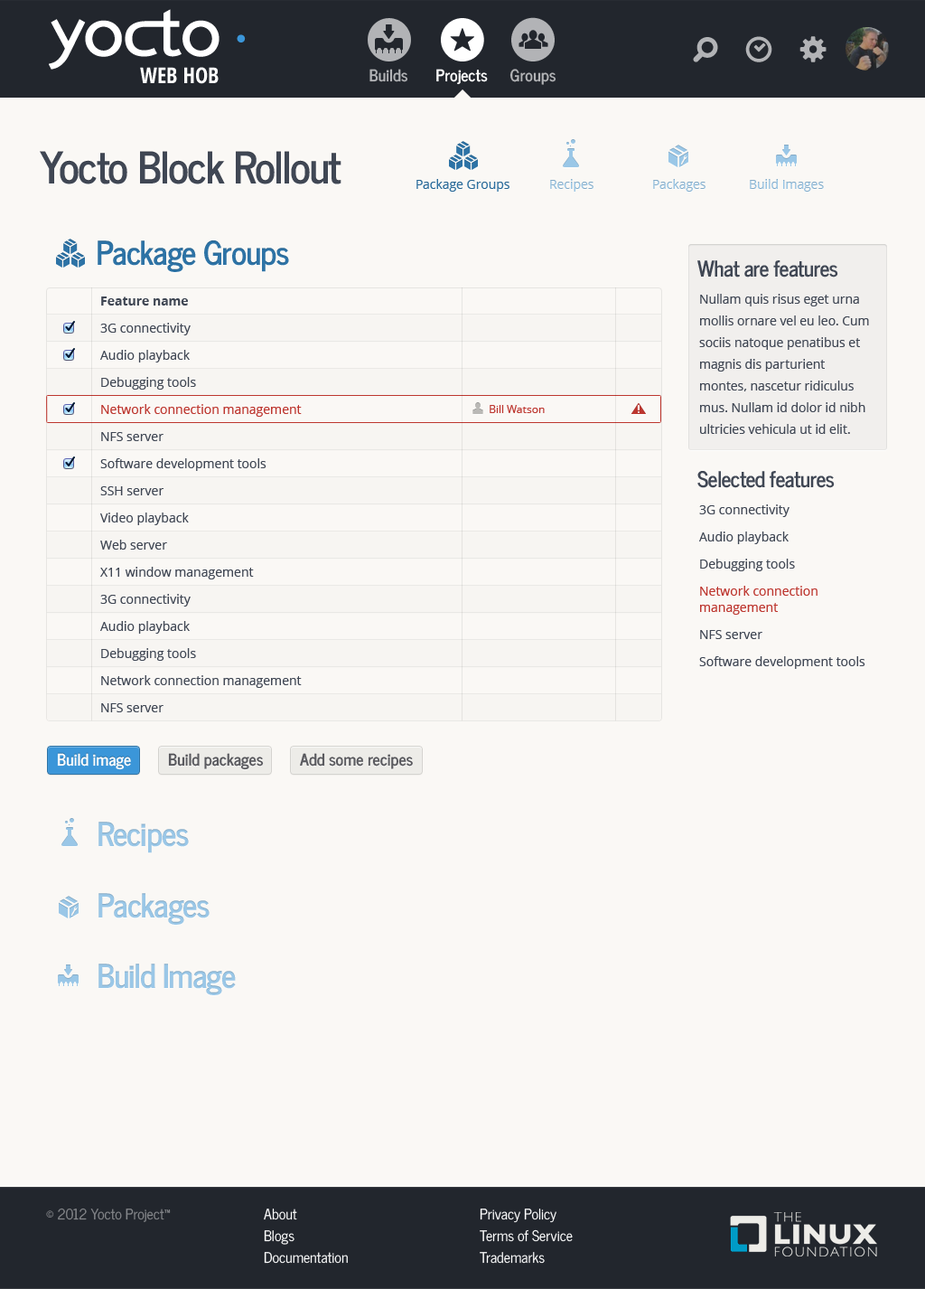
<style>
.page{position:relative;width:925px;height:1289px;background:#faf8f5}
.page>*{position:absolute;margin:0}
.t1{font:21.7px "OpenSans-CondensedBold";color:#ffffff;text-transform:uppercase}
.t2{font:16.3px "NewsCycle-Bold";color:#b2b3b6}
.t3{font:16.3px "NewsCycle-Bold";color:#ffffff}
.t4{font:43.4px "NewsCycle-Bold";letter-spacing:-0.025em;color:#404754}
.t5{font:12.7px "OpenSans";color:#2d73a6}
.t6{font:12.7px "OpenSans"}
.t7{font:12.7px "OpenSans";color:#8eb7d5}
.t8{font:32.5px "NewsCycle-Bold";letter-spacing:-0.025em;color:#2d73a6}
.t9{font:21.7px "NewsCycle-Bold";letter-spacing:-0.025em;color:#404754}
.t10{font:12.7px/21.7px "OpenSans";color:#404754}
.t11{font:12.7px "OpenSans-Bold";color:#404754}
.t12{font:12.7px/16.3px "OpenSans";color:#404754}
.t13{font:12.7px/16.3px "OpenSans";color:#bd362f}
.t14{font:10.8px "OpenSans";color:#bd362f}
.t15{font:16.3px "NewsCycle-Bold";color:#5b5b60}
.t16{font:32.5px "NewsCycle-Bold";letter-spacing:-0.025em;color:#9ac7e7}
.t17{font:14.5px "NewsCycle-Regular";color:#86888c}
.t18{font:14.5px/21.7px "NewsCycle-Regular";color:#ffffff}
</style>
<div class="page">
<p class="t1" style="left:140px;top:67px;width:79px;height:17px">Web Hob</p>
<p class="t2" style="left:370px;top:69px;width:38px;height:13px">Builds</p>
<p class="t3" style="left:436px;top:69px;width:52px;height:16px">Projects</p>
<p class="t2" style="left:510px;top:69px;width:47px;height:16px">Groups</p>
<p class="t4" style="left:40px;top:151px;width:302px;height:33px">Yocto Block Rollout</p>
<p class="t5" style="left:417px;top:179px;width:93px;height:13px">Package Groups</p>
<p class="t6" style="left:550px;top:179px;width:44px;height:13px">Recipes</p>
<p class="t6" style="left:653px;top:179px;width:53px;height:13px">Packages</p>
<p class="t7" style="left:750px;top:179px;width:74px;height:13px">Build Images</p>
<p class="t8" style="left:98px;top:239px;width:191px;height:33px">Package Groups</p>
<p class="t9" style="left:698px;top:260px;width:141px;height:17px">What are features</p>
<p class="t10" style="left:699px;top:294px;width:170px;height:140px">Nullam quis risus eget urna mollis ornare vel eu leo. Cum sociis natoque penatibus et magnis dis parturient montes, nascetur ridiculus mus. Nullam id dolor id nibh ultricies vehicula ut id elit.</p>
<p class="t11" style="left:101px;top:296px;width:87px;height:9px">Feature name</p>
<p class="t12" style="left:100px;top:323px;width:202px;height:389px">3G connectivity<br>Audio playback<br>Debugging tools<br><span class="t13">Network connection management<br></span>NFS server<br>Software development tools<br>SSH server<br>Video playback<br>Web server<br>X11 window management<br>3G connectivity<br>Audio playback<br>Debugging tools<br>Network connection management<br>NFS server</p>
<p class="t14" style="left:490px;top:405px;width:55px;height:8px">Bill Watson</p>
<p class="t9" style="left:698px;top:471px;width:137px;height:17px">Selected features</p>
<p class="t12" style="left:699px;top:504px;width:167px;height:165px">3G connectivity<br>Audio playback<br>Debugging tools<br><span class="t13">Network connection management<br></span>NFS server<br>Software development tools</p>
<p class="t3" style="left:57px;top:753px;width:74px;height:17px">Build image</p>
<p class="t15" style="left:168px;top:753px;width:96px;height:17px">Build packages</p>
<p class="t15" style="left:300px;top:753px;width:113px;height:16px">Add some recipes</p>
<p class="t16" style="left:98px;top:821px;width:91px;height:32px">Recipes</p>
<p class="t16" style="left:98px;top:893px;width:112px;height:31px">Packages</p>
<p class="t16" style="left:98px;top:963px;width:138px;height:32px">Build Image</p>
<p class="t17" style="left:46px;top:1207px;width:125px;height:15px">© 2012 Yocto Project™</p>
<p class="t18" style="left:264px;top:1208px;width:84px;height:55px">About<br>Blogs<br>Documentation</p>
<p class="t18" style="left:480px;top:1208px;width:93px;height:55px">Privacy Policy<br>Terms of Service<br>Trademarks</p>
</div>
